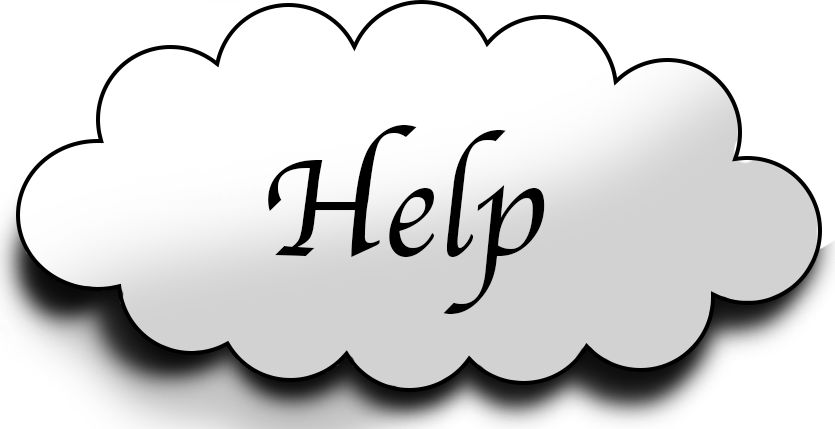
<style>
.page{position:relative;width:835px;height:429px;background:#ffffff}
.page>*{position:absolute;margin:0}
.t1{font:144px "Apple-Chancery";color:#000000}
</style>
<div class="page">
<p class="t1" style="left:268px;top:125px;width:277px;height:189px">Help</p>
</div>
